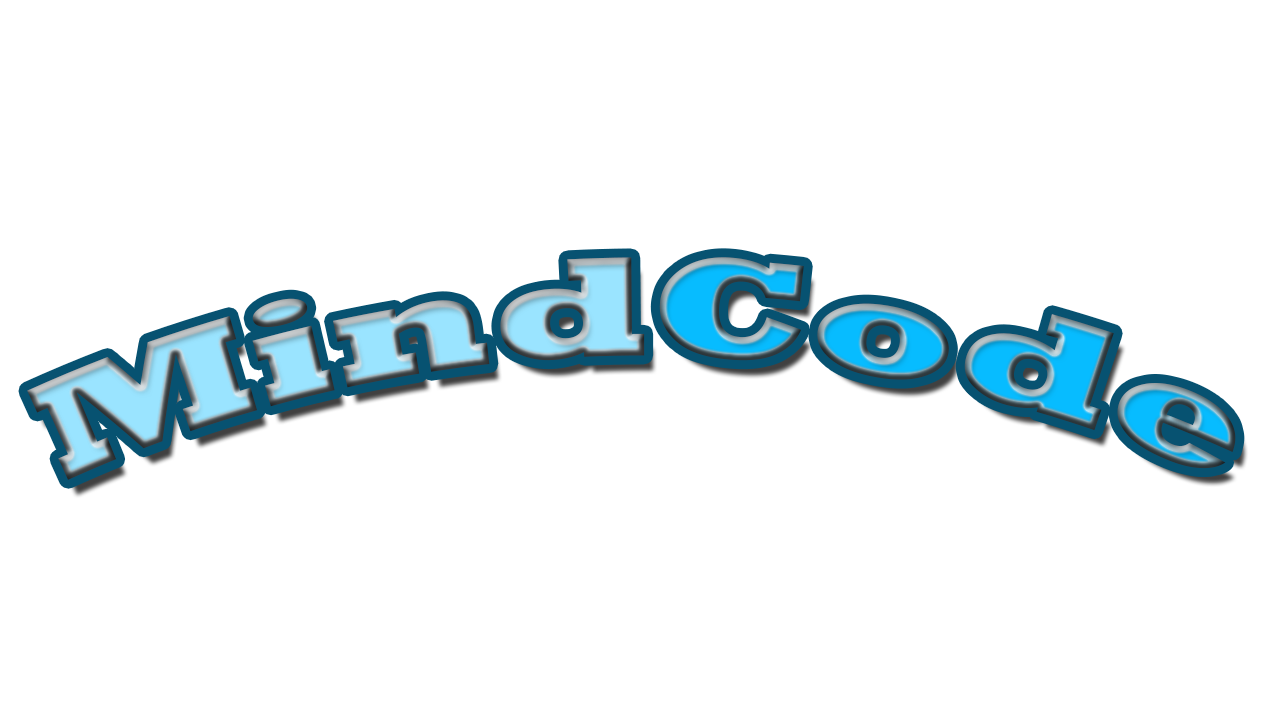
<style>
.page{position:relative;width:1280px;height:720px;background:#ffffff}
.page>*{position:absolute;margin:0}
.t1{font:144px "Rockwell-ExtraBold"}
</style>
<div class="page">
<p class="t1" style="left:27px;top:257px;width:1209px;height:223px">MindCode</p>
</div>
